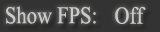
<style>
.page{position:relative;width:160px;height:32px;background:#333333}
.page>*{position:absolute;margin:0}
.t1{font:24px "TimesNewRomanPSMT";color:#cdcbc9;scale:0.86 1}
</style>
<div class="page">
<p class="t1" style="left:6px;top:6px;width:90px;height:18px">Show FPS:</p>
<p class="t1" style="left:115px;top:6px;width:31px;height:18px">Off</p>
</div>
